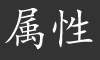
<style>
.page{position:relative;width:100px;height:60px;background:#333333}
.page>*{position:absolute;margin:0}
.t1{font:46.7px "KaiTi";color:#fcfcfc}
</style>
<div class="page">
<p class="t1" style="left:5px;top:8px;width:88px;height:42px">属性</p>
</div>
